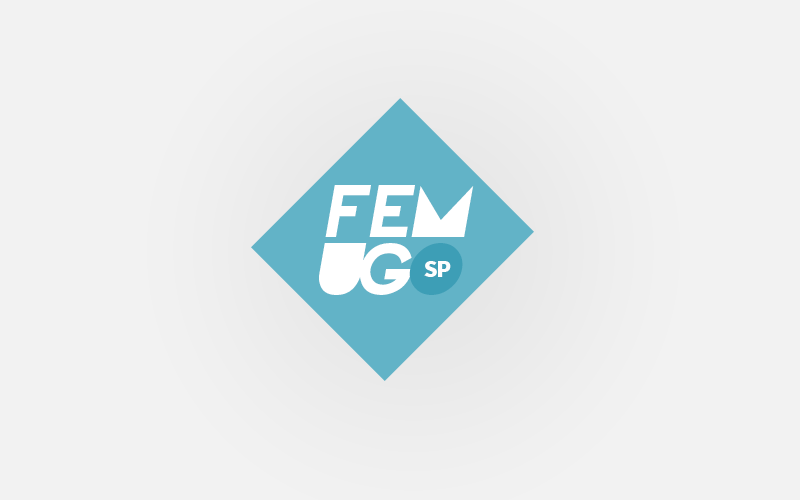
<style>
.page{position:relative;width:800px;height:500px;background:#f2f2f2}
.page>*{position:absolute;margin:0}
.t1{font:74px "FULLMoonOnMars";color:#ffffff;font-style:italic}
.t2{font:74px "FULLMoonOnMars";letter-spacing:-0.12em;color:#ffffff;font-style:italic}
.t3{font:24px "SourceCodePro-Black";letter-spacing:-0.06em;color:#fefefe;text-transform:uppercase}
</style>
<div class="page">
<p class="t1" style="left:325px;top:185px;width:149px;height:52px">feM</p>
<p class="t2" style="left:319px;top:243px;width:93px;height:52px">UG</p>
<p class="t3" style="left:424px;top:261px;width:27px;height:16px">sp</p>
</div>
